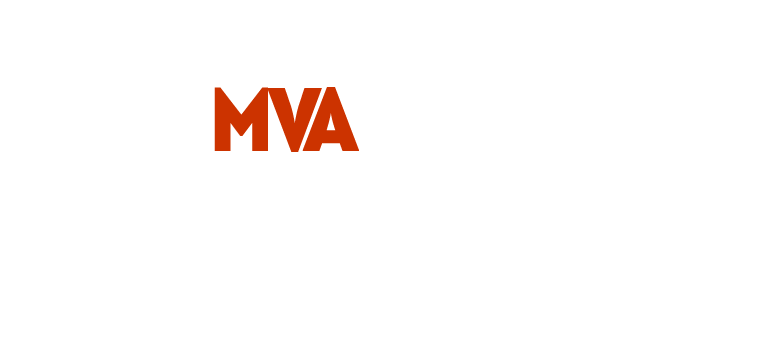
<style>
.page{position:relative;width:767px;height:360px;background:#ffffff}
.page>*{position:absolute;margin:0}
.t1{font:90px "IntroCondBlackFree";color:#cc3300}
</style>
<div class="page">
<p class="t1" style="left:214px;top:87px;width:145px;height:65px">MVA</p>
</div>
